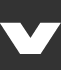
<style>
.page{position:relative;width:61px;height:70px;background:#333333}
.page>*{position:absolute;margin:0}
.t1{font:63.4px "FrontPageNews1.1";color:#ffffff;scale:2.18 1}
</style>
<div class="page">
<p class="t1" style="left:0px;top:22px;width:61px;height:32px">v</p>
</div>
